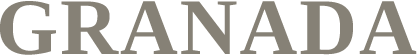
<style>
.page{position:relative;width:418px;height:56px;background:#ffffff}
.page>*{position:absolute;margin:0}
.t1{font:80px "Tinos-Bold";letter-spacing:0.025em;color:#868176}
</style>
<div class="page">
<p class="t1" style="left:0px;top:1px;width:417px;height:54px">GRANADA</p>
</div>
